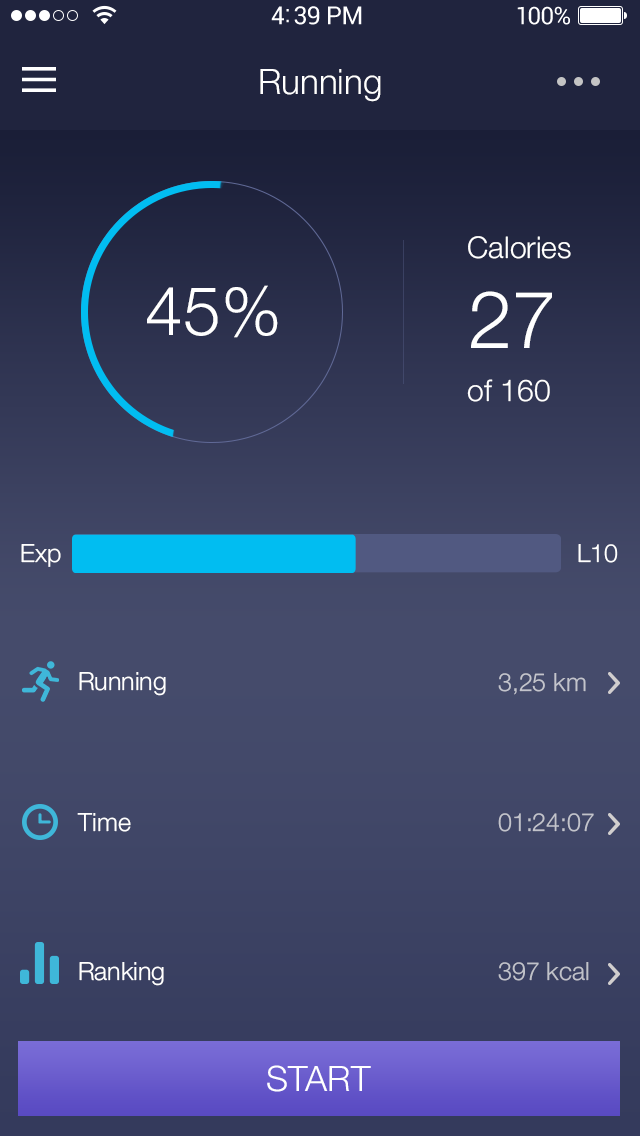
<style>
.page{position:relative;width:640px;height:1136px}
.page>*{position:absolute;margin:0}
.t1{font:35px "HelveticaNeue-Light";color:#ffffff}
.t2{font:30px/75px "HelveticaNeue-Light";color:#ffffff}
.t3{font:80px/90px "HelveticaNeue-Light";color:#ffffff}
.t4{font:68px "HelveticaNeue-Light";color:#ffffff}
.t5{font:30px "HelveticaNeue-Light";color:#ffffff}
.t6{font:25px "HelveticaNeue-Light";color:#ffffff}
.t7{font:25px "HelveticaNeue-Light";color:#c3c4cc}
.t8{font:25px "HelveticaNeue-Light";color:#c2c3cb}
.t9{font:25px "HelveticaNeue-Light";color:#c0c2c9}
</style>
<div class="page">
<p class="t1" style="left:260px;top:69px;width:121px;height:33px">Running</p>
<p class="t2" style="left:468px;top:236px;width:103px;height:112px">Calories <br><span class="t3">27</span></p>
<p class="t4" style="left:147px;top:285px;width:131px;height:53px">45%</p>
<p class="t5" style="left:467px;top:379px;width:83px;height:23px">of 160</p>
<p class="t6" style="left:21px;top:544px;width:40px;height:23px">Exp</p>
<p class="t6" style="left:578px;top:544px;width:40px;height:19px">L10</p>
<p class="t6" style="left:79px;top:672px;width:87px;height:24px">Running</p>
<p class="t7" style="left:498px;top:673px;width:88px;height:22px">3,25 km</p>
<p class="t6" style="left:77px;top:813px;width:54px;height:19px">Time</p>
<p class="t8" style="left:498px;top:813px;width:96px;height:19px">01:24:07</p>
<p class="t6" style="left:79px;top:962px;width:85px;height:24px">Ranking</p>
<p class="t9" style="left:498px;top:962px;width:91px;height:19px">397 kcal</p>
<p class="t1" style="left:267px;top:1065px;width:104px;height:27px">START</p>
</div>
